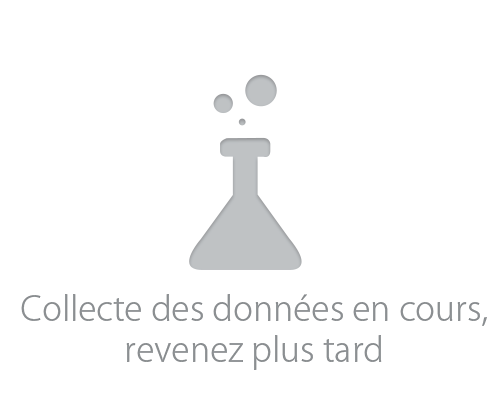
<style>
.page{position:relative;width:500px;height:400px;background:#ffffff}
.page>*{position:absolute;margin:0}
.t1{font:34px "KozGoPr6N-Light";color:#94989b}
</style>
<div class="page">
<p class="t1" style="left:21px;top:294px;width:466px;height:76px;text-align:center">Collecte des données en cours,<br>revenez plus tard</p>
</div>
